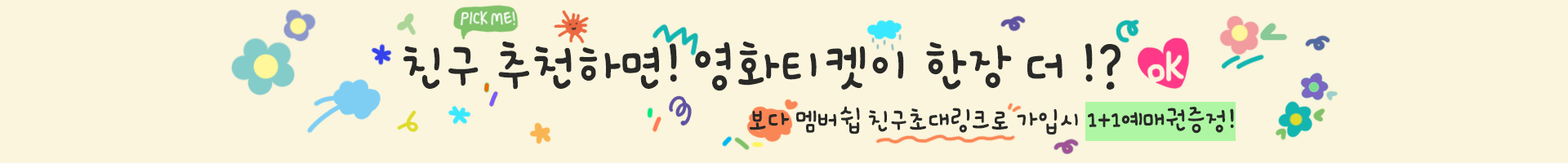
<style>
.page{position:relative;width:1568px;height:163px;background:#faf5dc}
.page>*{position:absolute;margin:0}
.t1{font:58.8px "Cafe24Syongsyong";color:#292928;scale:0.9 1}
.t2{font:29.4px "Cafe24Syongsyong";color:#292928;scale:0.9 1}
</style>
<div class="page">
<p class="t1" style="left:403px;top:41px;width:717px;height:50px">친구 추천하면! 영화티켓이 한장 더 !?</p>
<p class="t2" style="left:749px;top:106px;width:485px;height:29px">보다 멤버쉽 친구초대링크로 가입시 1+1예매권증정!</p>
</div>
